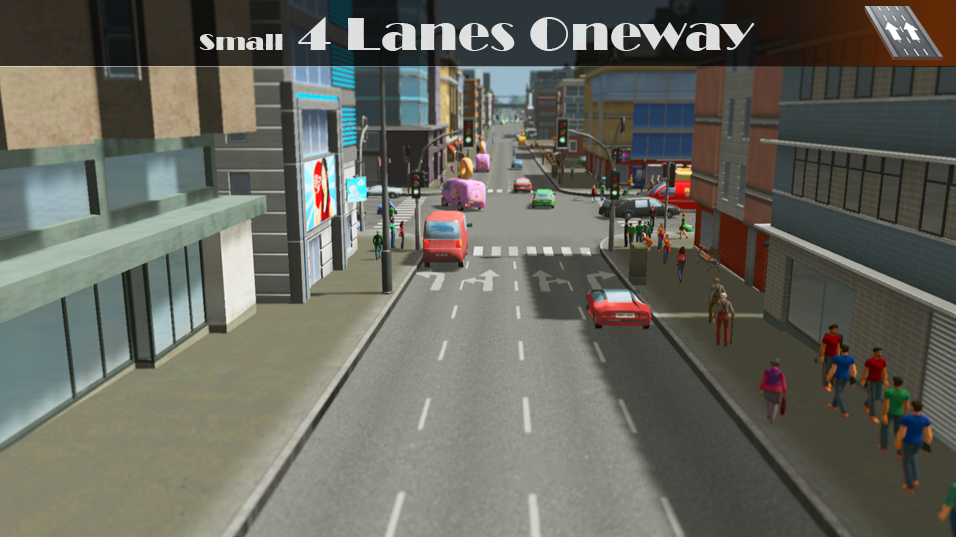
<style>
.page{position:relative;width:956px;height:537px}
.page>*{position:absolute;margin:0}
.t1{font:48px "Broadway";color:#dfdfdf;scale:1.11 1}
.t2{font:24px "Broadway";color:#dfdfdf;scale:1.11 1}
</style>
<div class="page">
<p class="t1" style="left:199px;top:16px;width:556px;height:35px"><span class="t2">Small  </span>4 Lanes Oneway</p>
</div>
